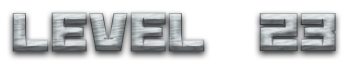
<style>
.page{position:relative;width:364px;height:64px;background:#ffffff}
.page>*{position:absolute;margin:0}
.t1{font:60px "BananaBrick"}
</style>
<div class="page">
<p class="t1" style="left:12px;top:12px;width:324px;height:40px">Level  23</p>
</div>
